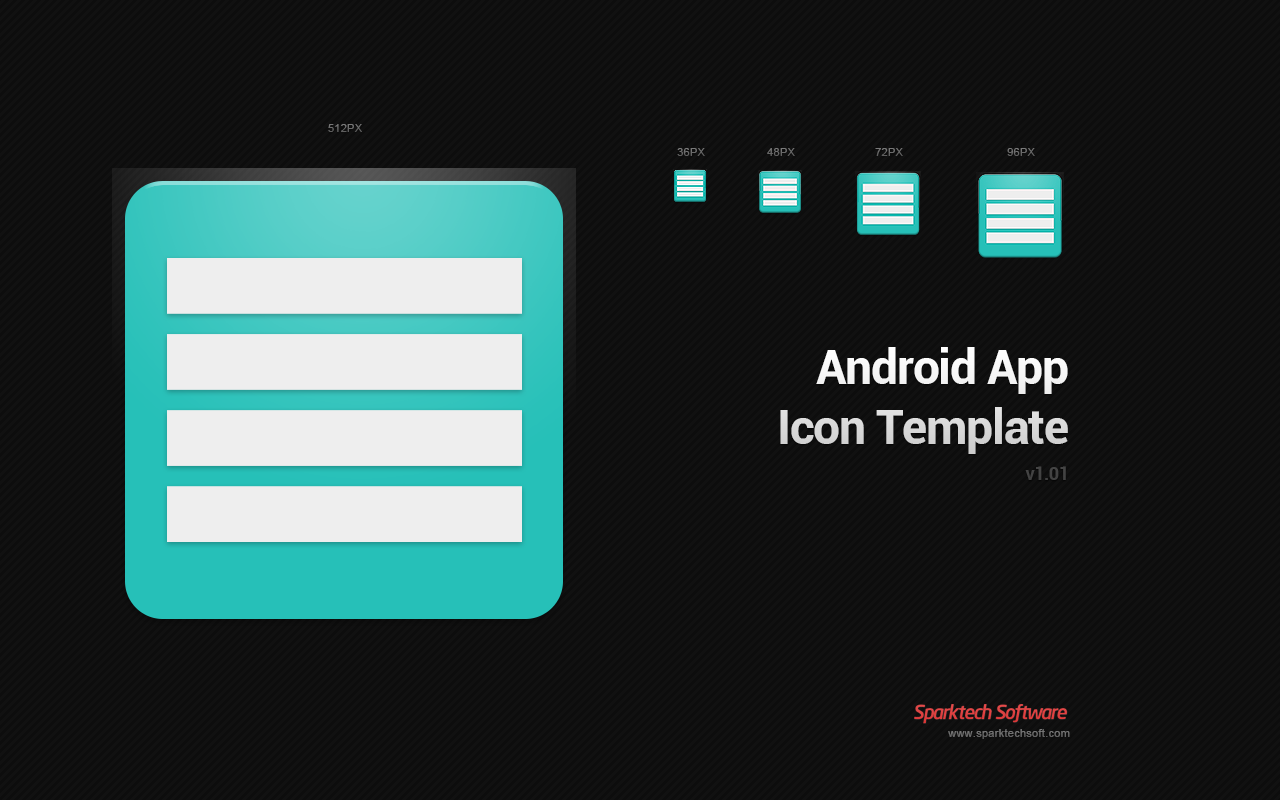
<style>
.page{position:relative;width:1280px;height:800px;background:#111111}
.page>*{position:absolute;margin:0}
.t1{font:11px "ArialMT";letter-spacing:0.025em;color:#707070;text-transform:uppercase}
.t2{font:11px "ArialMT";letter-spacing:0.025em;color:#6f6f6f;text-transform:uppercase}
.t3{font:11px "ArialMT";letter-spacing:0.025em;color:#6a6a6a;text-transform:uppercase}
.t4{font:11px "ArialMT";letter-spacing:0.025em;color:#717171;text-transform:uppercase}
.t5{font:48px/60px "Roboto-Bold";letter-spacing:-0.025em}
.t6{font:18px/36px "Roboto-Bold";letter-spacing:-0.025em}
.t7{font:11px "ArialMT";letter-spacing:0.025em;color:#6e6e6e}
</style>
<div class="page">
<p class="t1" style="left:328px;top:124px;width:34px;height:8px">512px</p>
<p class="t2" style="left:677px;top:148px;width:28px;height:8px">36px</p>
<p class="t3" style="left:767px;top:148px;width:28px;height:8px">48px</p>
<p class="t4" style="left:875px;top:148px;width:28px;height:8px">72px</p>
<p class="t2" style="left:1007px;top:148px;width:28px;height:8px">96px</p>
<p class="t5" style="left:780px;top:347px;width:288px;height:133px;text-align:right">Android App<br>Icon Template<br><span class="t6">v1.01</span></p>
<p class="t7" style="left:948px;top:729px;width:122px;height:10px">www.sparktechsoft.com</p>
</div>
